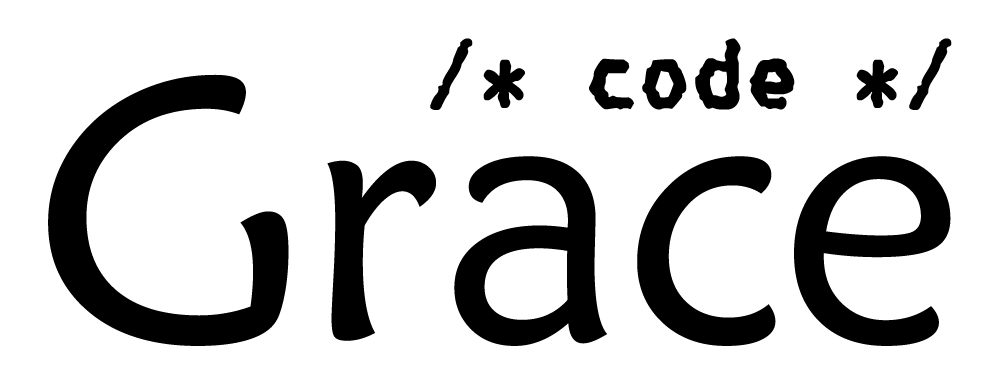
<style>
.page{position:relative;width:1000px;height:385px;background:#ffffff}
.page>*{position:absolute;margin:0}
.t1{font:106.6px "Console-Bold";color:#000000}
.t2{font:370px "STXinwei";color:#000000}
</style>
<div class="page">
<p class="t1" style="left:430px;top:38px;width:522px;height:72px">/* code */</p>
<p class="t2" style="left:48px;top:74px;width:903px;height:272px">Grace</p>
</div>
